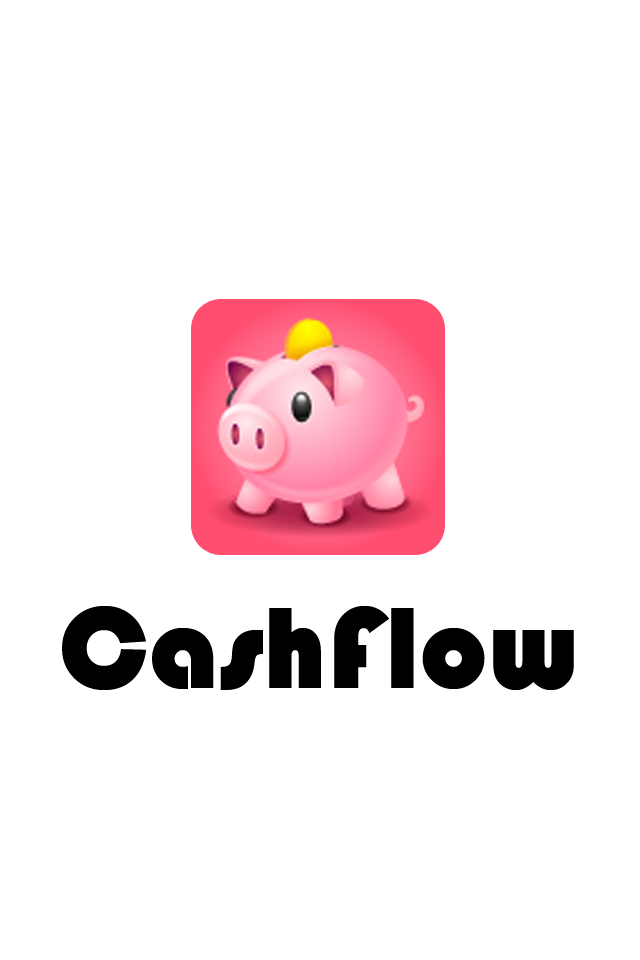
<style>
.page{position:relative;width:640px;height:960px;background:#ffffff}
.page>*{position:absolute;margin:0}
.t1{font:120px "Bauhaus93";color:#000000}
</style>
<div class="page">
<p class="t1" style="left:62px;top:606px;width:512px;height:84px">CashFlow</p>
</div>
